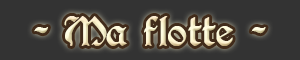
<style>
.page{position:relative;width:300px;height:60px;background:#333333}
.page>*{position:absolute;margin:0}
.t1{font:30px "PerryGothic"}
</style>
<div class="page">
<p class="t1" style="left:34px;top:16px;width:232px;height:31px">- Ma flotte -</p>
</div>
